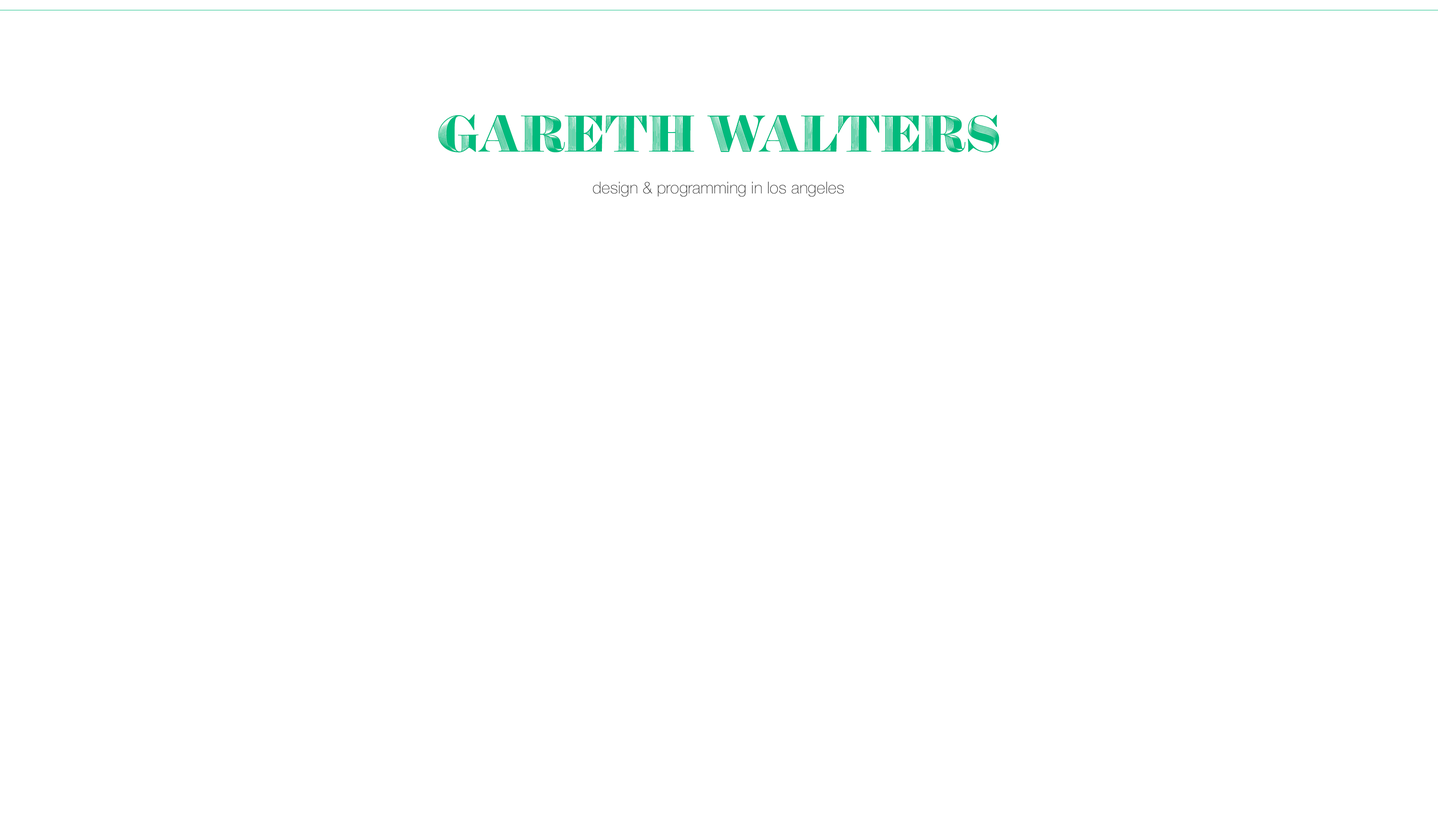
<style>
.page{position:relative;width:1438px;height:829px;background:#ffffff}
.page>*{position:absolute;margin:0}
.t1{font:59.2px "Obsidian-Roman";color:#00ba7c;text-transform:uppercase}
.t2{font:16.4px "HelveticaNeue-Thin";color:#333333}
</style>
<div class="page">
<p class="t1" style="left:438px;top:114px;width:561px;height:38px">Gareth Walters</p>
<p class="t2" style="left:593px;top:181px;width:251px;height:16px">design &amp; programming in los angeles</p>
</div>
